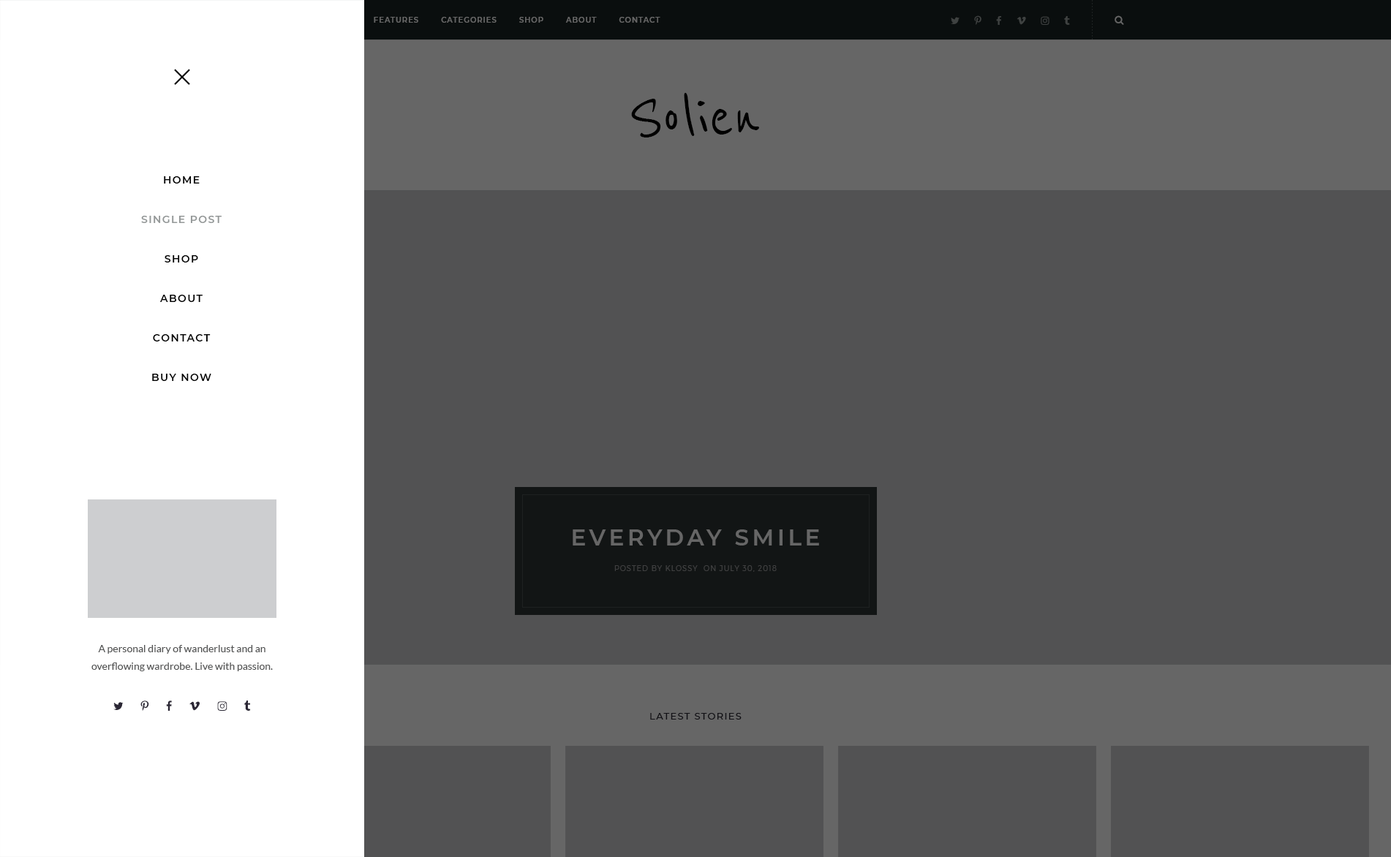
<style>
.page{position:relative;width:1391px;height:857px;background:#525253}
.page>*{position:absolute;margin:0}
.t1{font:7.3px "Montserrat-SemiBold";letter-spacing:0.1em;color:#666666;text-transform:uppercase}
.t2{font:73.1px "ReenieBeanie";color:#000000}
.t3{font:10.2px/39.5px "Montserrat-SemiBold";letter-spacing:0.1em;color:#000000;text-transform:uppercase}
.t4{font:10.2px/39.5px "Montserrat-SemiBold";letter-spacing:0.1em;color:#949898;text-transform:uppercase}
.t5{font:22.7px "Montserrat-SemiBold";letter-spacing:0.15em;color:#666666;text-transform:uppercase}
.t6{font:7.3px "Montserrat-Light";letter-spacing:0.1em;color:#404041;text-transform:uppercase}
.t7{font:10.2px/17.6px "Lato-Regular";color:#545555}
.t8{font:9.5px "Montserrat-Medium";letter-spacing:0.1em;color:#111015;text-transform:uppercase}
</style>
<div class="page">
<p class="t1" style="left:325px;top:17px;width:335px;height:6px">Home        Features        Categories        Shop        About        Contact</p>
<p class="t2" style="left:631px;top:93px;width:128px;height:45px">Solien</p>
<p class="t3" style="left:141px;top:176px;width:81px;height:205px;text-align:center">Home<br><span class="t4">Single Post<br></span>Shop<br>About<br>Contact<br>Buy Now</p>
<p class="t5" style="left:573px;top:530px;width:246px;height:16px">Everyday Smile</p>
<p class="t6" style="left:614px;top:565px;width:163px;height:7px">Posted by Klossy  on July 30, 2018</p>
<p class="t7" style="left:91px;top:645px;width:182px;height:26px;text-align:center">A personal diary of wanderlust and an <br>overflowing wardrobe. Live with passion.</p>
<p class="t8" style="left:650px;top:713px;width:92px;height:7px">Latest Stories</p>
</div>
